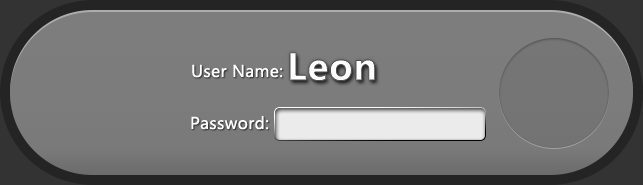
<style>
.page{position:relative;width:643px;height:185px;background:#7c7c7c}
.page>*{position:absolute;margin:0}
.t1{font:36px "MicrosoftYaHei-Bold";letter-spacing:0.02em;color:#fefefe}
.t2{font:16px "MicrosoftYaHei";letter-spacing:0.02em;color:#ffffff}
</style>
<div class="page">
<p class="t1" style="left:290px;top:52px;width:85px;height:29px">Leon</p>
<p class="t2" style="left:192px;top:64px;width:91px;height:14px">User Name:</p>
<p class="t2" style="left:191px;top:116px;width:78px;height:14px">Password:</p>
</div>
